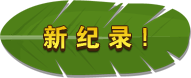
<style>
.page{position:relative;width:191px;height:78px;background:#4c7b17}
.page>*{position:absolute;margin:0}
.t1{font:25px "Jdahei";letter-spacing:0.3em}
</style>
<div class="page">
<p class="t1" style="left:43px;top:27px;width:104px;height:24px">新纪录!</p>
<p class="t1" style="left:43px;top:25px;width:104px;height:24px">新纪录!</p>
</div>
